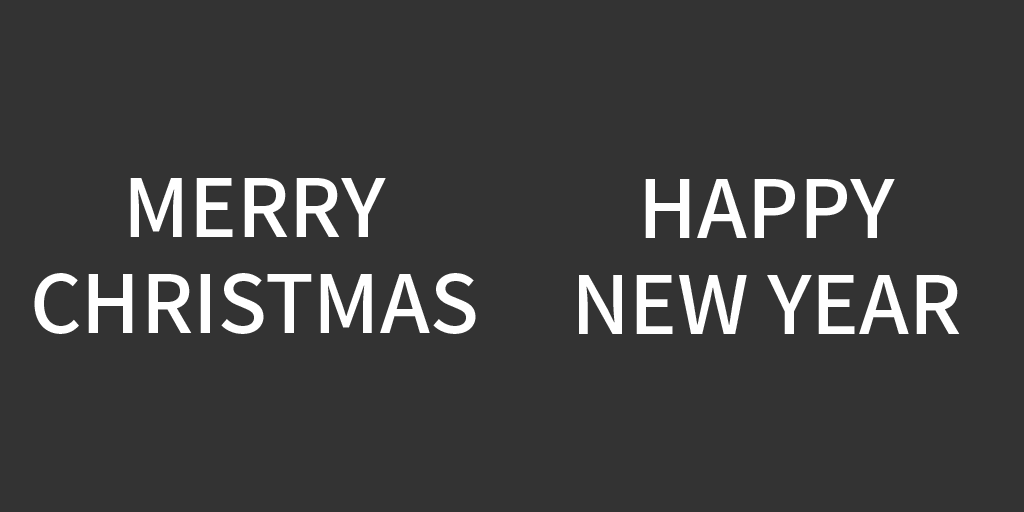
<style>
.page{position:relative;width:1024px;height:512px;background:#333333}
.page>*{position:absolute;margin:0}
.t1{font:80px "NotoSansCJKkr-Medium";color:#ffffff}
</style>
<div class="page">
<p class="t1" style="left:34px;top:178px;width:442px;height:156px;text-align:center">MERRY<br>CHRISTMAS</p>
<p class="t1" style="left:579px;top:179px;width:381px;height:155px;text-align:center">HAPPY<br>NEW YEAR</p>
</div>
